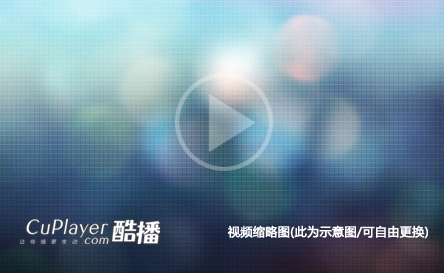
<style>
.page{position:relative;width:444px;height:273px}
.page>*{position:absolute;margin:0}
.t1{font:12px "MicrosoftYaHei";letter-spacing:0.01em;color:#ffffff;font-weight:bold}
</style>
<div class="page">
<p class="t1" style="left:227px;top:225px;width:201px;height:14px">视频缩略图(此为示意图/可自由更换)</p>
</div>
